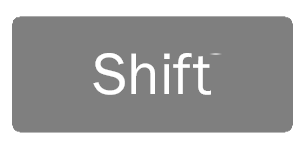
<style>
.page{position:relative;width:304px;height:152px;background:#7f7f7f}
.page>*{position:absolute;margin:0}
.t1{font:60.1px "FranklinGothic-Book";color:#ffffff}
</style>
<div class="page">
<p class="t1" style="left:93px;top:53px;width:118px;height:42px">Shift</p>
</div>
